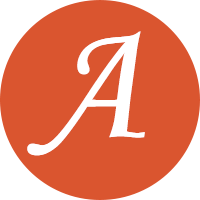
<style>
.page{position:relative;width:200px;height:200px;background:#da552f}
.page>*{position:absolute;margin:0}
.t1{font:170px "MonotypeCorsiva";color:#ffffff}
</style>
<div class="page">
<p class="t1" style="left:27px;top:31px;width:117px;height:125px">A</p>
<p class="t1" style="left:28px;top:31px;width:117px;height:125px">A</p>
</div>
